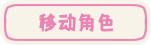
<style>
.page{position:relative;width:151px;height:45px;background:#f7f3e9}
.page>*{position:absolute;margin:0}
.t1{font:12px "shetumodengxiaofangti";color:#eb84b4;font-weight:bold;scale:0.94 1}
</style>
<div class="page">
<p class="t1" style="left:39px;top:13px;width:74px;height:19px">移动角色</p>
</div>
